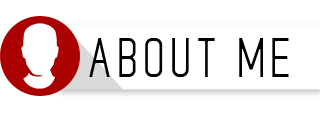
<style>
.page{position:relative;width:320px;height:117px;background:#ffffff}
.page>*{position:absolute;margin:0}
.t1{font:49.6px "078MKSDMediumCondensed";letter-spacing:0.14em;color:#000000}
</style>
<div class="page">
<p class="t1" style="left:89px;top:38px;width:200px;height:39px">ABOUT ME</p>
</div>
